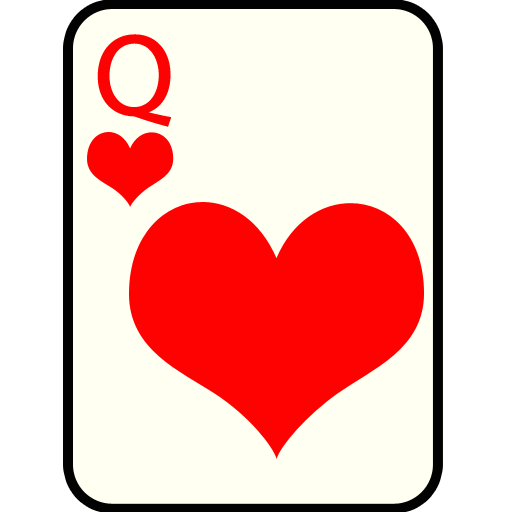
<style>
.page{position:relative;width:512px;height:512px;background:#fffff2}
.page>*{position:absolute;margin:0}
.t1{font:200px "MyriadPro-Regular";letter-spacing:-0.05em;color:#fd0202;font-variant:small-caps;font-weight:bold}
</style>
<div class="page">
<p class="t1" style="left:97px;top:34px;width:74px;height:93px">Q</p>
</div>
